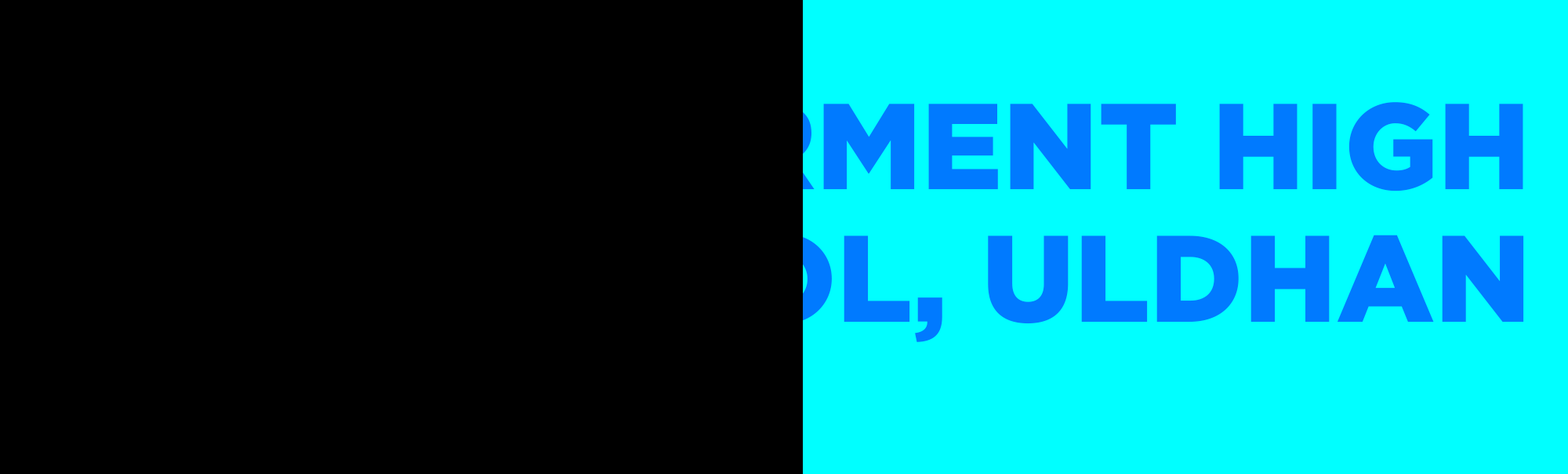
<style>
.page{position:relative;width:1568px;height:474px;background:#000000}
.page>*{position:absolute;margin:0}
.t1{font:121.7px "Gotham-Black"}
.t2{font:122.7px "Gotham-Black"}
</style>
<div class="page">
<p class="t1" style="left:369px;top:102px;width:1154px;height:89px">GOVERMENT HIGH</p>
<p class="t2" style="left:371px;top:234px;width:1153px;height:108px">SCHOOL, ULDHAN</p>
</div>
